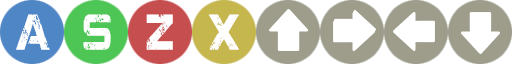
<style>
.page{position:relative;width:512px;height:64px;background:#ffffff}
.page>*{position:absolute;margin:0}
.t1{font:50.2px "JacintoSans";color:#ffffff;scale:0.63 1}
</style>
<div class="page">
<p class="t1" style="left:16px;top:14px;width:34px;height:36px">A</p>
<p class="t1" style="left:83px;top:14px;width:28px;height:36px">S</p>
<p class="t1" style="left:146px;top:14px;width:27px;height:36px">Z</p>
<p class="t1" style="left:208px;top:14px;width:31px;height:36px">X</p>
</div>
